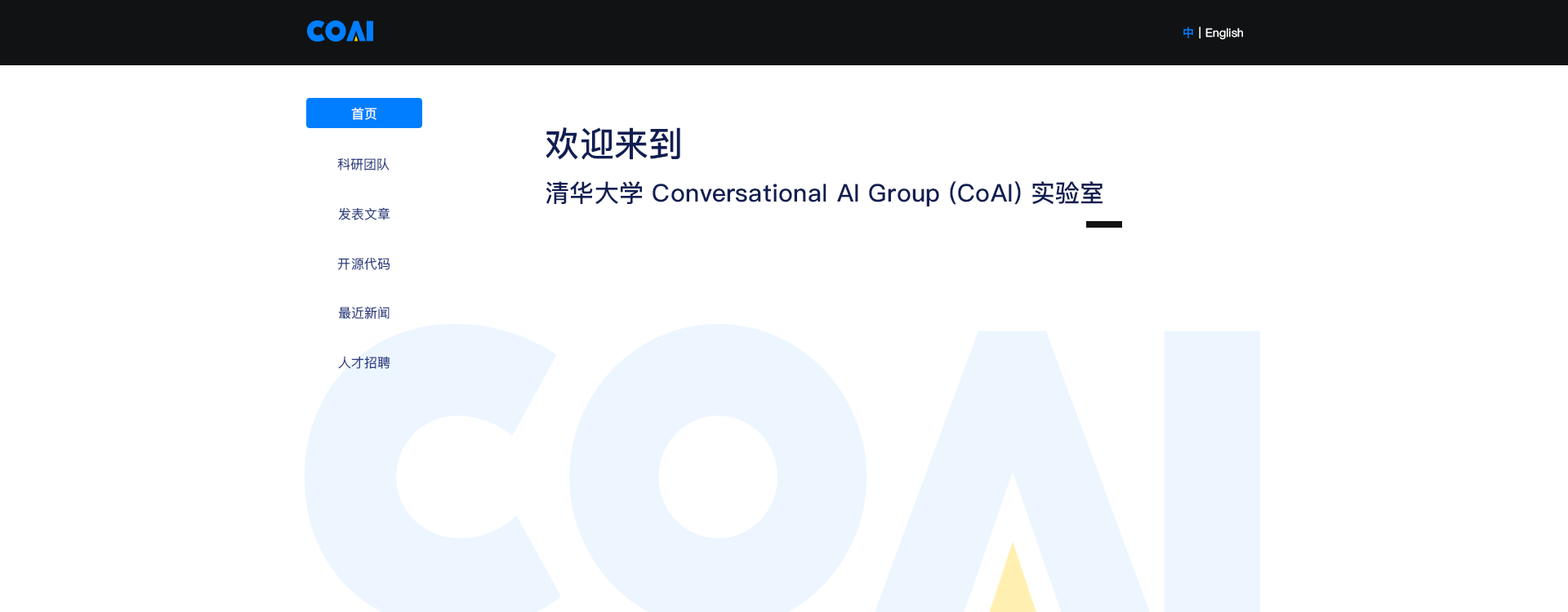
<style>
.page{position:relative;width:1568px;height:612px;background:#ffffff}
.page>*{position:absolute;margin:0}
.t1{font:11.4px "PingFangSC-Regular";letter-spacing:0.01em;color:#007eff}
.t2{font:11.4px "PingFangSC-Regular";letter-spacing:0.01em;color:#ffffff}
.t3{font:13.1px "PingFangSC-Regular";letter-spacing:0.01em;color:#ffffff}
.t4{font:24.5px/53.9px "PingFangSC-Medium";letter-spacing:0.01em;color:#101e52}
.t5{font:32.7px/53.9px "PingFangSC-Medium";letter-spacing:0.01em;color:#101e52}
.t6{font:34.3px/53.9px "PingFangSC-Medium";letter-spacing:0.01em;color:#101e52}
.t7{font:13.1px "PingFangSC-Regular";letter-spacing:0.01em;color:#2c3e81}
</style>
<div class="page">
<p class="t1" style="left:1183px;top:27px;width:10px;height:11px">中</p>
<p class="t2" style="left:1199px;top:26px;width:44px;height:14px">| English</p>
<p class="t3" style="left:351px;top:107px;width:26px;height:13px">首页</p>
<p class="t4" style="left:546px;top:127px;width:556px;height:80px;text-align:right"><span class="t5"> </span><span class="t6">欢迎来到<br></span>清华大学 Conversational AI Group (CoAI) 实验室</p>
<p class="t7" style="left:337px;top:158px;width:53px;height:13px">科研团队</p>
<p class="t7" style="left:338px;top:207px;width:52px;height:13px">发表文章</p>
<p class="t7" style="left:337px;top:257px;width:53px;height:13px">开源代码</p>
<p class="t7" style="left:338px;top:306px;width:52px;height:13px">最近新闻</p>
<p class="t7" style="left:338px;top:356px;width:52px;height:13px">人才招聘</p>
</div>
